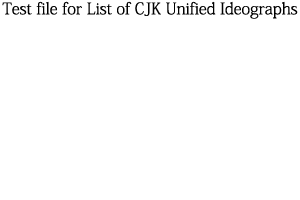
<style>
.page{position:relative;width:300px;height:200px;background:#ffffff}
.page>*{position:absolute;margin:0}
.t1{font:16px "AdobeFangsongStd-Regular";color:#000000}
</style>
<div class="page">
<p class="t1" style="left:2px;top:1px;width:296px;height:18px">Test file for List of CJK Unified Ideographs</p>
</div>
